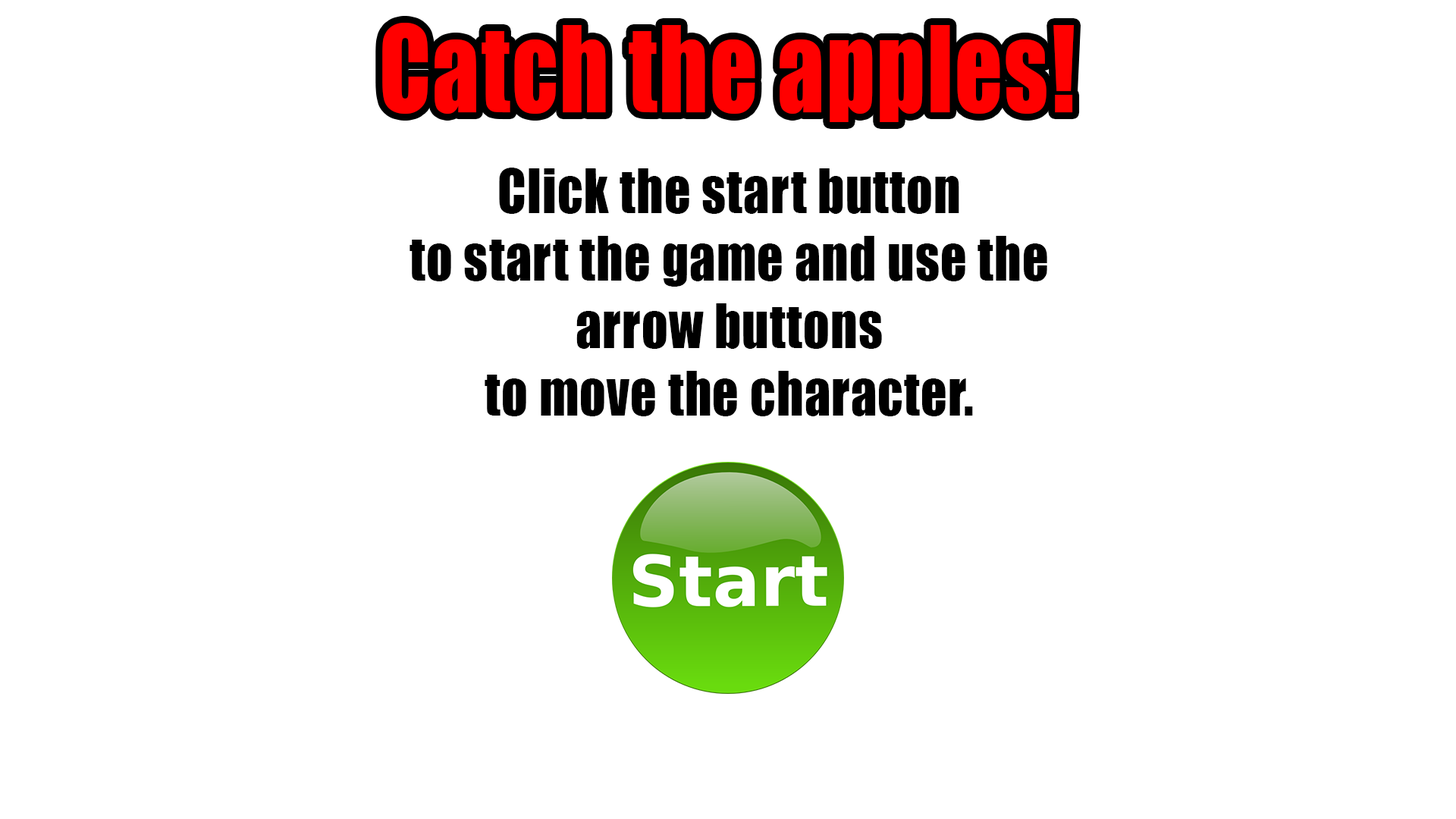
<style>
.page{position:relative;width:1456px;height:819px;background:#ffffff}
.page>*{position:absolute;margin:0}
.t1{font:110.5px "Impact";letter-spacing:0.02em;color:#ff0000;scale:0.84 1}
.t2{font:56.3px "Impact";letter-spacing:0.02em;color:#000000;scale:0.91 1}
</style>
<div class="page">
<p class="t1" style="left:382px;top:23px;width:692px;height:99px">Catch the apples!</p>
<p class="t2" style="left:409px;top:168px;width:638px;height:248px;text-align:center">Click the start button<br>to start the game and use the<br>arrow buttons<br>to move the character.</p>
</div>
